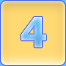
<style>
.page{position:relative;width:66px;height:66px}
.page>*{position:absolute;margin:0}
.t1{font:41px "Tahoma-Bold"}
</style>
<div class="page">
<p class="t1" style="left:21px;top:17px;width:25px;height:31px">4</p>
<p class="t1" style="left:21px;top:17px;width:25px;height:31px">4</p>
</div>
